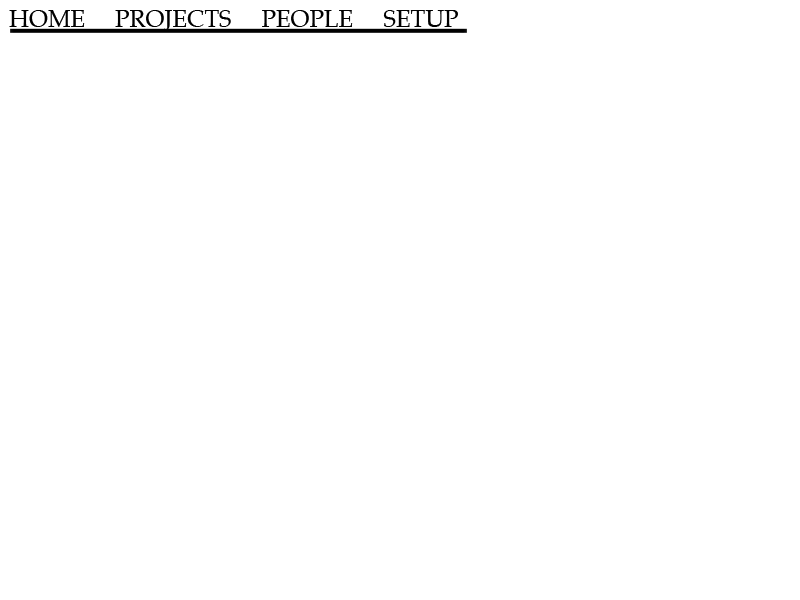
<style>
.page{position:relative;width:800px;height:600px;background:#ffffff}
.page>*{position:absolute;margin:0}
.t1{font:24px "Palatino-Roman";color:#000000}
</style>
<div class="page">
<p class="t1" style="left:9px;top:10px;width:449px;height:21px">HOME     PROJECTS     PEOPLE     SETUP</p>
</div>
